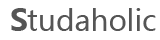
<style>
.page{position:relative;width:160px;height:40px;background:#ffffff}
.page>*{position:absolute;margin:0}
.t1{font:30px "MicrosoftYaHei-Bold";color:#555555}
.t2{font:29px "MicrosoftYaHei";color:#555555}
</style>
<div class="page">
<p class="t1" style="left:11px;top:8px;width:16px;height:23px">S</p>
<p class="t2" style="left:27px;top:8px;width:129px;height:23px">tudaholic</p>
</div>
